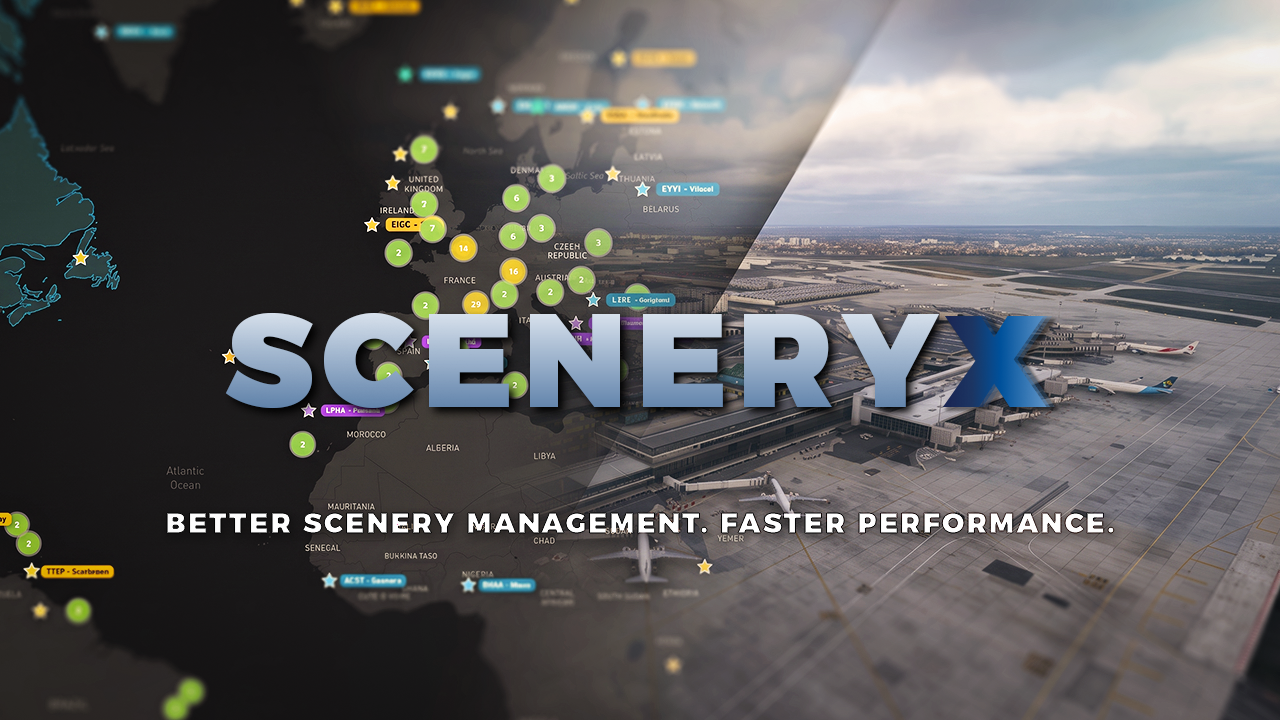
<style>
.page{position:relative;width:1280px;height:720px}
.page>*{position:absolute;margin:0}
.t1{font:132.3px "Montserrat-Black";letter-spacing:0.07em;text-transform:uppercase}
.t2{font:28.1px "Montserrat-Black";letter-spacing:0.07em;color:#fffbfb;text-transform:uppercase}
</style>
<div class="page">
<p class="t1" style="left:225px;top:312px;width:715px;height:97px">SCENERY</p>
<p class="t2" style="left:167px;top:513px;width:947px;height:20px">Better Scenery Management. Faster Performance.</p>
</div>
